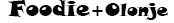
<style>
.page{position:relative;width:174px;height:23px;background:#ffffff}
.page>*{position:absolute;margin:0}
.t1{font:18px "SnapITC-Regular";color:#060606}
.t2{font:22px "SnapITC-Regular";color:#060606}
</style>
<div class="page">
<p class="t1" style="left:8px;top:0px;width:160px;height:20px"><span class="t2">Foodie</span>+Olonje</p>
</div>
